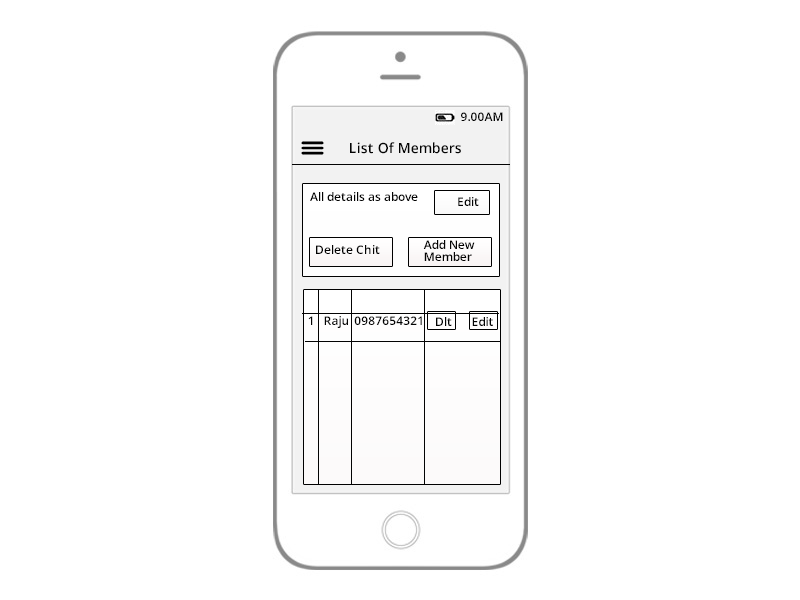
<style>
.page{position:relative;width:800px;height:600px;background:#ffffff}
.page>*{position:absolute;margin:0}
.t1{font:12px "OpenSans-Semibold";color:#030303}
.t2{font:14px "OpenSans-Semibold";color:#030303}
.t3{font:12px/6px "OpenSans-Semibold";color:#030303}
</style>
<div class="page">
<p class="t1" style="left:461px;top:112px;width:42px;height:9px">9.00AM</p>
<p class="t2" style="left:350px;top:142px;width:111px;height:12px">List Of Members</p>
<p class="t1" style="left:310px;top:192px;width:108px;height:9px">All details as above</p>
<p class="t1" style="left:458px;top:197px;width:21px;height:9px">Edit</p>
<p class="t1" style="left:316px;top:245px;width:64px;height:9px">Delete Chit</p>
<p class="t3" style="left:423px;top:240px;width:52px;height:21px">Add New <br><br>Member</p>
<p class="t1" style="left:308px;top:316px;width:5px;height:9px">1</p>
<p class="t1" style="left:324px;top:316px;width:24px;height:12px">Raju</p>
<p class="t1" style="left:354px;top:316px;width:68px;height:9px">0987654321</p>
<p class="t1" style="left:436px;top:317px;width:16px;height:9px">Dlt</p>
<p class="t1" style="left:472px;top:317px;width:21px;height:9px">Edit</p>
</div>
